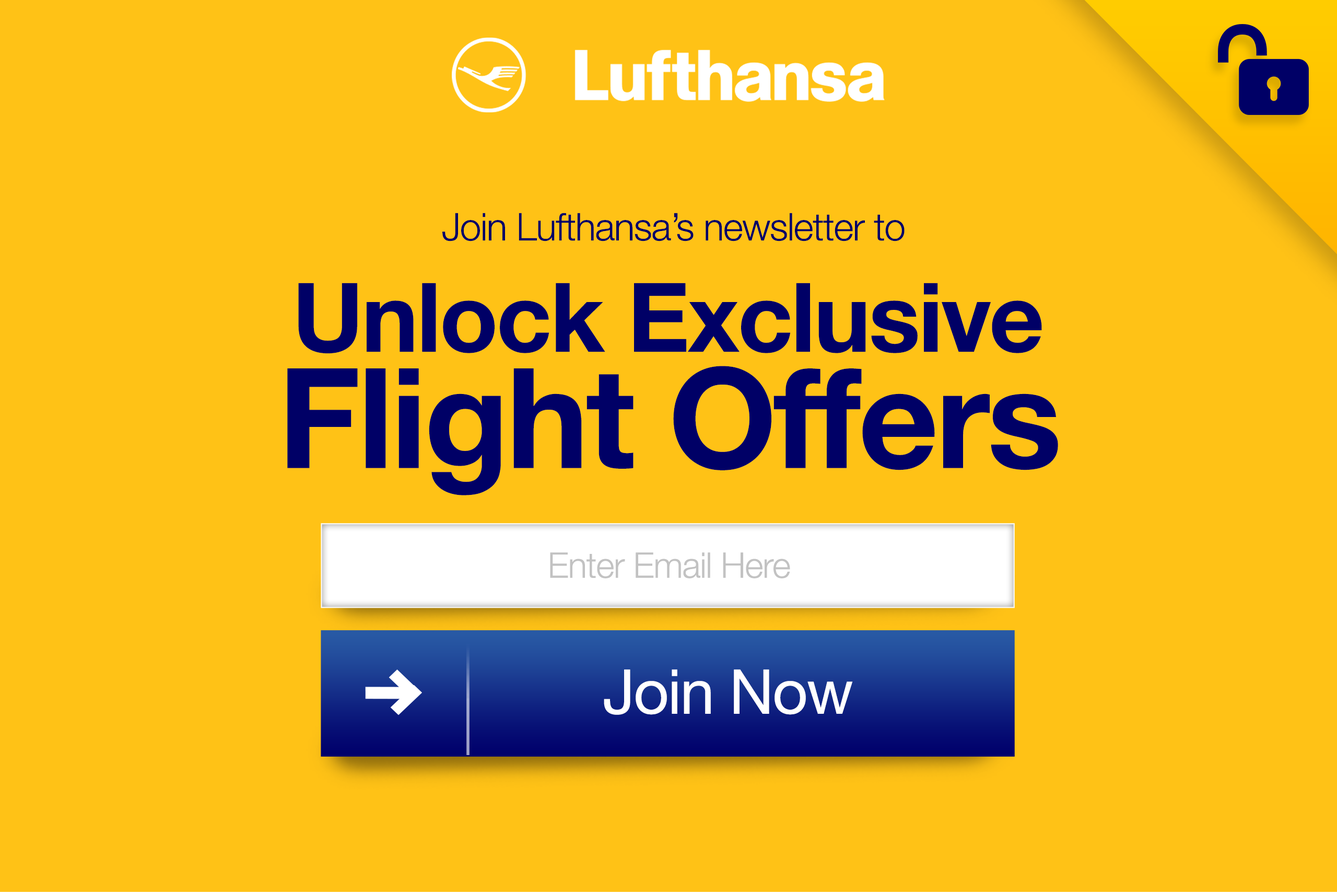
<style>
.page{position:relative;width:1337px;height:892px;background:#ffc216}
.page>*{position:absolute;margin:0}
.t1{font:38.2px "HelveticaNeue-Light";letter-spacing:-0.02em;color:#000066}
.t2{font:96.1px "HelveticaNeue-Bold";letter-spacing:-0.02em;color:#000066}
.t3{font:139.3px "HelveticaNeue-Bold";letter-spacing:-0.02em;color:#000066}
.t4{font:35.4px "HelveticaNeue-Light";letter-spacing:-0.02em;color:#c2c2c2}
.t5{font:61.7px "HelveticaNeue";letter-spacing:-0.02em;color:#ffffff}
</style>
<div class="page">
<p class="t1" style="left:442px;top:213px;width:463px;height:28px">Join Lufthansa’s newsletter to</p>
<p class="t2" style="left:298px;top:283px;width:744px;height:71px">Unlock Exclusive</p>
<p class="t3" style="left:287px;top:366px;width:771px;height:129px">Flight Offers</p>
<p class="t4" style="left:550px;top:552px;width:240px;height:26px">Enter Email Here</p>
<p class="t5" style="left:604px;top:669px;width:249px;height:46px">Join Now</p>
</div>
